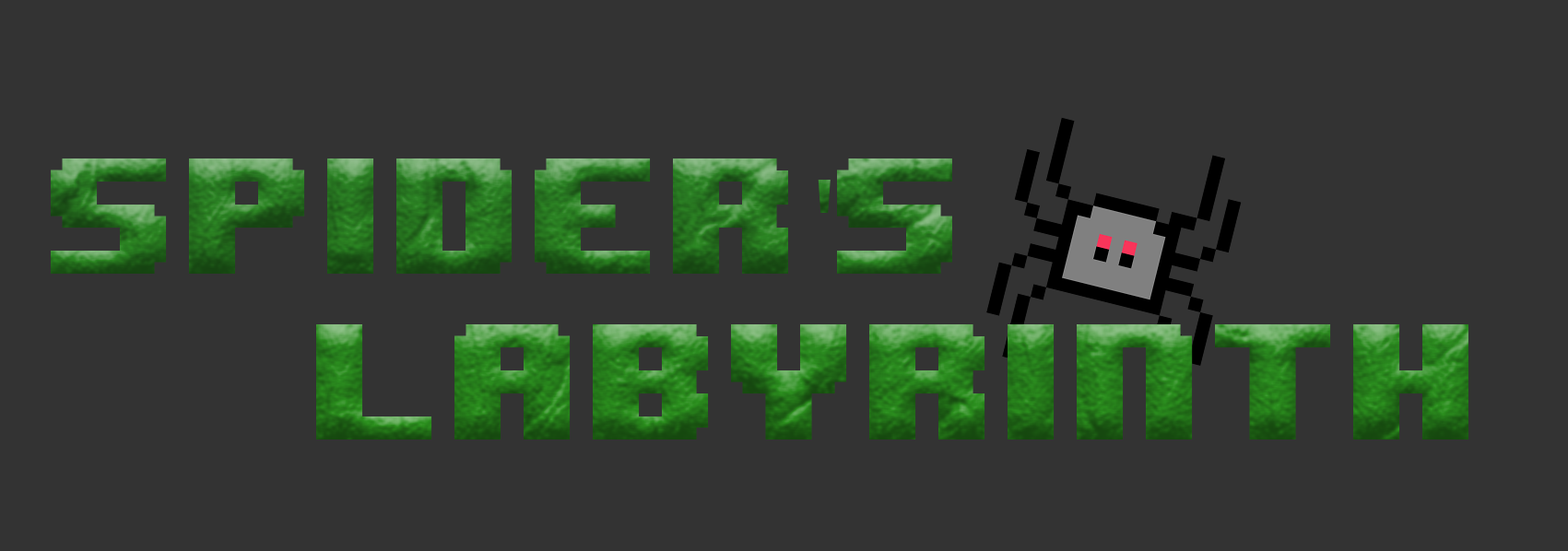
<style>
.page{position:relative;width:1568px;height:551px;background:#333333}
.page>*{position:absolute;margin:0}
.t1{font:138.3px "8BITWONDERNominal"}
.t2{font:138.3px "MyriadPro-Regular"}
</style>
<div class="page">
<p class="t1" style="left:51px;top:159px;width:1417px;height:281px">SPIDER<span class="t2">'</span>S<br>        LABYRINTH</p>
</div>
